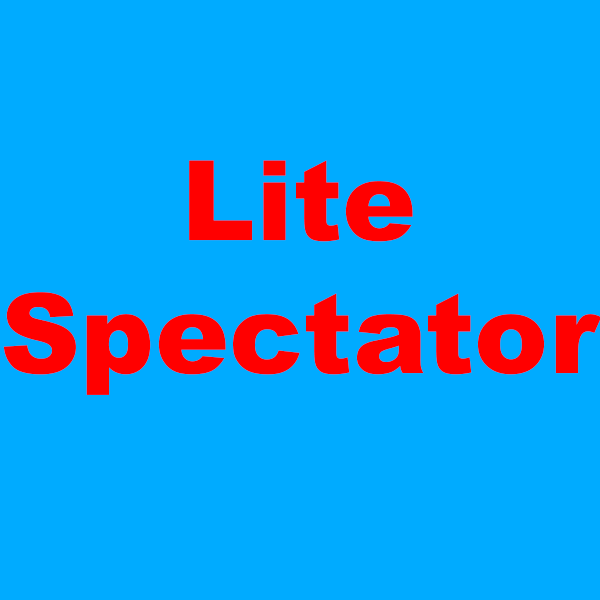
<style>
.page{position:relative;width:600px;height:600px;background:#00abff}
.page>*{position:absolute;margin:0}
.t1{font:110.8px "Arial-Black";color:#ff0000}
</style>
<div class="page">
<p class="t1" style="left:3px;top:160px;width:599px;height:235px;text-align:center">Lite<br>Spectator</p>
</div>
